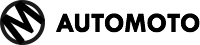
<style>
.page{position:relative;width:200px;height:45px;background:#ffffff}
.page>*{position:absolute;margin:0}
.t1{font:49px "TwCenMT-Bold";color:#000000;text-transform:uppercase}
.t2{font:27.7px "TwCenMT-Bold";color:#000000;text-transform:uppercase}
</style>
<div class="page">
<p class="t1" style="left:0px;top:0px;width:46px;height:45px;rotate:-45deg">M</p>
<p class="t2" style="left:56px;top:13px;width:144px;height:20px">AutoMoto</p>
</div>
